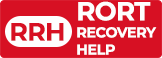
<style>
.page{position:relative;width:162px;height:58px;background:#d71023}
.page>*{position:absolute;margin:0}
.t1{font:14.3px "Montserrat-Bold";letter-spacing:-0.025em;color:#fefefe;text-transform:uppercase}
.t2{font:26px "Montserrat-Bold";letter-spacing:-0.025em;color:#fefefe;text-transform:uppercase}
.t3{font:25.2px "Montserrat-Bold";letter-spacing:-0.025em;color:#d71023;text-transform:uppercase}
</style>
<div class="page">
<p class="t1" style="left:77px;top:1px;width:80px;height:54px"><span class="t2">Rort<br></span>Recovery Help</p>
<p class="t3" style="left:11px;top:23px;width:53px;height:18px">RRH</p>
</div>
